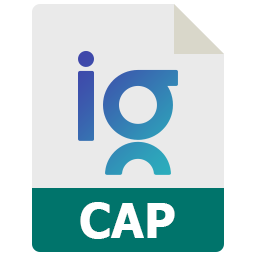
<style>
.page{position:relative;width:256px;height:256px;background:#eaeaea}
.page>*{position:absolute;margin:0}
.t1{font:48px "Tahoma-Bold";color:#ffffff}
</style>
<div class="page">
<p class="t1" style="left:80px;top:202px;width:95px;height:37px">CAP</p>
</div>
